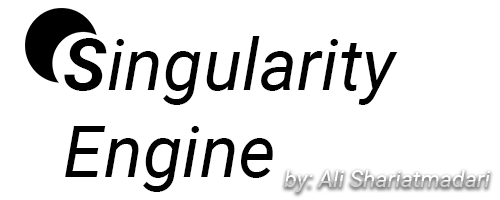
<style>
.page{position:relative;width:500px;height:200px;background:#ffffff}
.page>*{position:absolute;margin:0}
.t1{font:72.2px "Roboto-Italic";color:#020101}
.t2{font:72.2px "Roboto-BoldItalic";color:#000000}
</style>
<div class="page">
<p class="t1" style="left:64px;top:36px;width:334px;height:156px"><span class="t2">S</span>ingularity<br>Engine</p>
</div>
